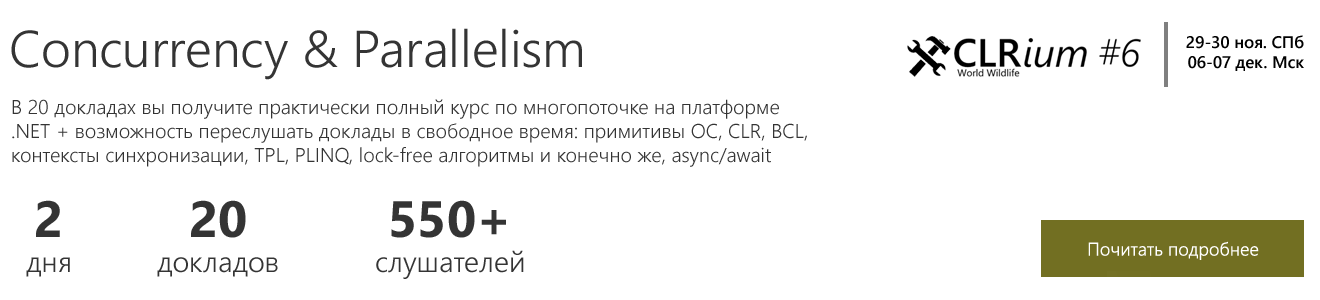
<style>
.page{position:relative;width:1320px;height:300px;background:#ffffff}
.page>*{position:absolute;margin:0}
.t1{font:51.7px "SegoeUI-Semilight";color:#343434}
.t2{font:16.7px "SegoeUI-SemiBold";color:#010101}
.t3{font:20px "SegoeUI-Semilight";color:#343434}
.t4{font:29px "SegoeUI-Semilight";color:#343434}
.t5{font:51px "SegoeUI-Bold";color:#343434}
.t6{font:18.3px "SegoeUI-Semilight";color:#ffffff}
</style>
<div class="page">
<p class="t1" style="left:11px;top:28px;width:571px;height:52px">Concurrency &amp; Parallelism</p>
<p class="t2" style="left:1186px;top:35px;width:118px;height:36px;text-align:right">29-30 ноя. СПб<br>06-07 дек. Мск</p>
<p class="t3" style="left:12px;top:99px;width:795px;height:68px">В 20 докладах вы получите практически полный курс по многопоточке на платформе .NET + возможность переслушать доклады в свободное время: примитивы ОС, CLR, BCL, контексты синхронизации, TPL, PLINQ, lock-free алгоритмы и конечно же, async/await</p>
<p class="t4" style="left:26px;top:200px;width:44px;height:77px;text-align:center"><span class="t5">2<br></span>дня</p>
<p class="t4" style="left:157px;top:200px;width:121px;height:77px;text-align:center"><span class="t5">20<br></span>докладов</p>
<p class="t4" style="left:376px;top:200px;width:148px;height:79px;text-align:center"><span class="t5">550+<br></span>слушателей</p>
<p class="t6" style="left:1088px;top:241px;width:171px;height:19px">Почитать подробнее</p>
</div>
